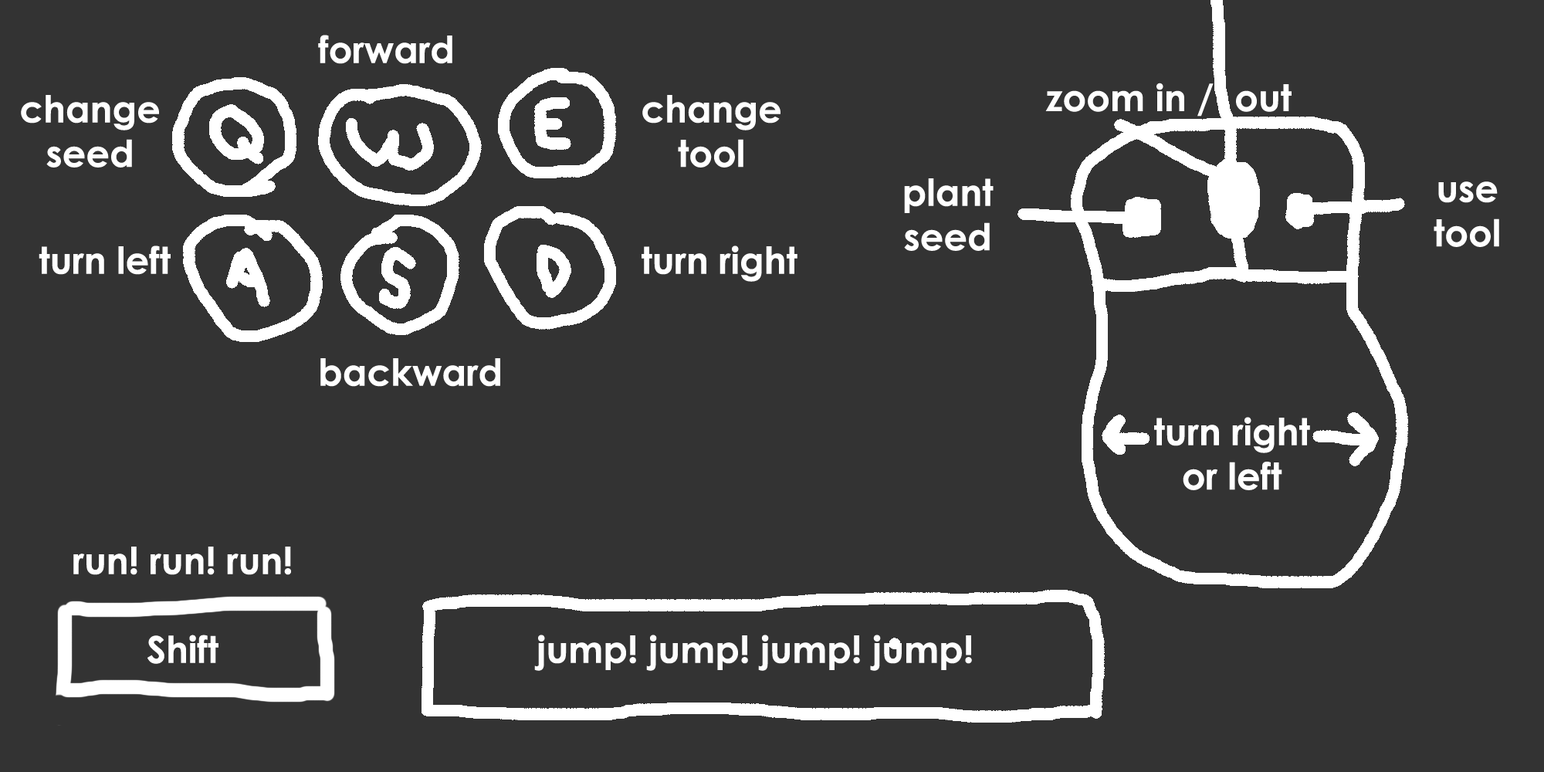
<style>
.page{position:relative;width:1544px;height:772px;background:#333333}
.page>*{position:absolute;margin:0}
.t1{font:37.1px "CenturyGothic-Bold";color:#ffffff}
.t2{font:37.1px "CenturyGothic-Bold";color:#fdfdfd}
</style>
<div class="page">
<p class="t1" style="left:318px;top:35px;width:134px;height:29px">forward</p>
<p class="t1" style="left:1045px;top:83px;width:247px;height:34px">zoom in /  out</p>
<p class="t1" style="left:21px;top:95px;width:138px;height:73px;text-align:center">change<br>seed</p>
<p class="t1" style="left:642px;top:95px;width:139px;height:73px;text-align:center">change <br>tool</p>
<p class="t1" style="left:904px;top:178px;width:90px;height:73px;text-align:center">plant<br>seed</p>
<p class="t1" style="left:1434px;top:181px;width:66px;height:66px;text-align:center">use<br>tool</p>
<p class="t1" style="left:39px;top:246px;width:132px;height:29px">turn left</p>
<p class="t1" style="left:642px;top:246px;width:156px;height:36px">turn right</p>
<p class="t1" style="left:320px;top:358px;width:180px;height:29px">backward</p>
<p class="t1" style="left:1154px;top:417px;width:156px;height:73px;text-align:center">turn right<br>or left</p>
<p class="t1" style="left:73px;top:547px;width:218px;height:117px;text-align:center">run! run! run!<br><br>Shift</p>
<p class="t2" style="left:534px;top:635px;width:438px;height:36px">jump! jump! jump! jump!</p>
</div>
